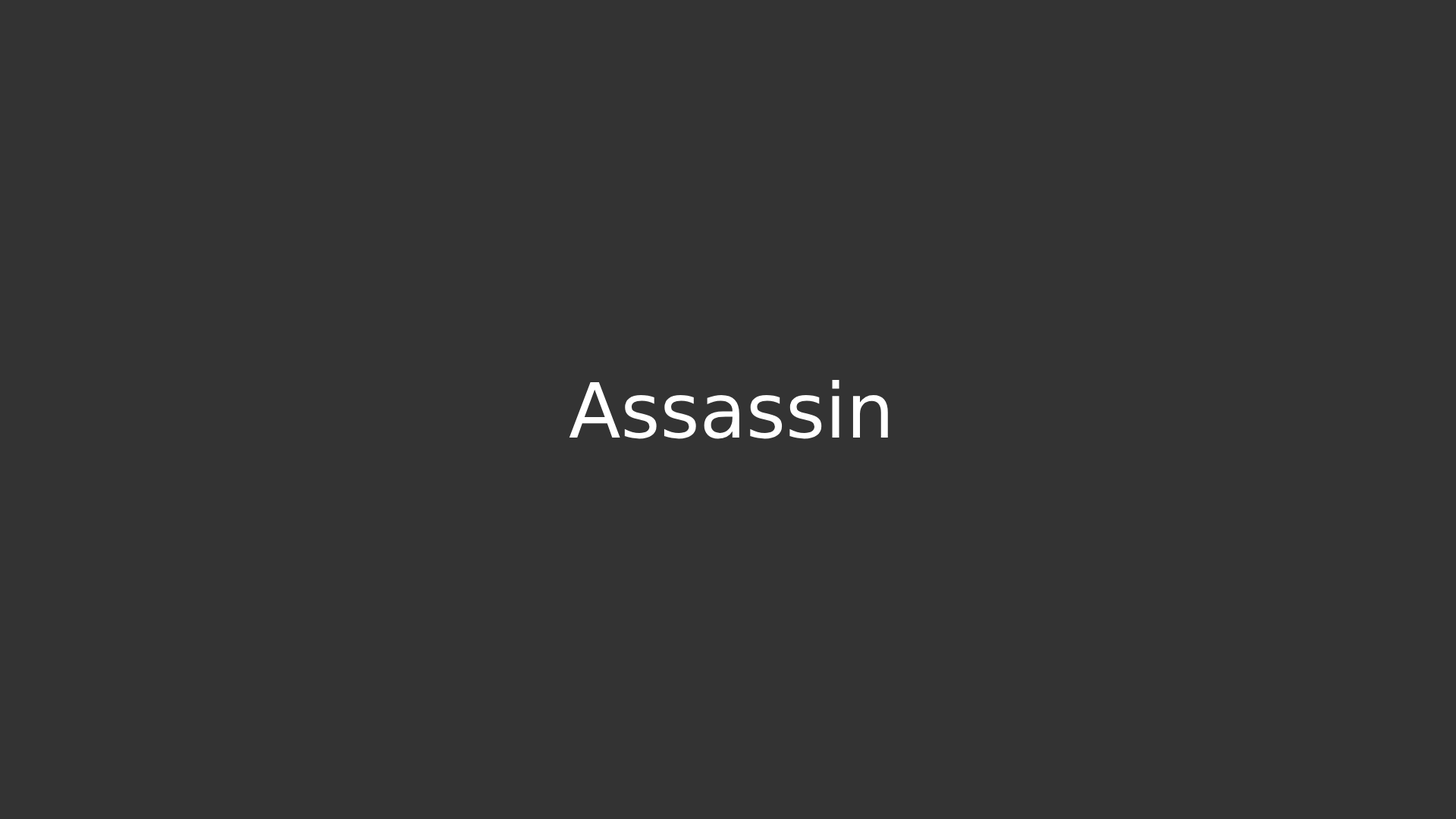
<style>
.page{position:relative;width:1456px;height:819px;background:#333333}
.page>*{position:absolute;margin:0}
.t1{font:75.8px "DejaVuSans";color:#ffffff}
</style>
<div class="page">
<p class="t1" style="left:569px;top:380px;width:319px;height:59px">Assassin</p>
</div>
